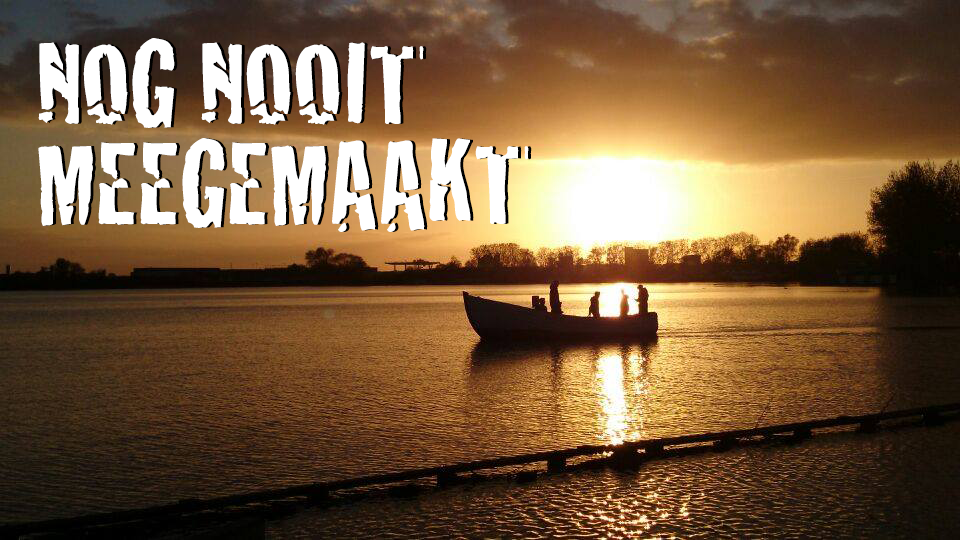
<style>
.page{position:relative;width:960px;height:540px}
.page>*{position:absolute;margin:0}
.t1{font:120px/100px "Crackhouse";color:#ffffff}
</style>
<div class="page">
<p class="t1" style="left:38px;top:38px;width:491px;height:194px">NOG NOOIT<br>MEEGEMAAKT</p>
<p class="t1" style="left:41px;top:38px;width:491px;height:194px">NOG NOOIT<br>MEEGEMAAKT</p>
</div>
